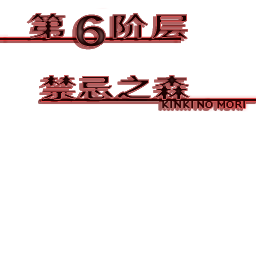
<style>
.page{position:relative;width:256px;height:256px;background:#ffffff}
.page>*{position:absolute;margin:0}
.t1{font:28.3px "HYWenHei-HEW";letter-spacing:0.052em;scale:1.36 1}
.t2{font:43.3px "HYWenHei-HEW";letter-spacing:0.052em;scale:1.36 1}
.t3{font:27.1px "HYWenHei-HEW";letter-spacing:0.044em;scale:1.33 1}
</style>
<div class="page">
<p class="t1" style="left:29px;top:13px;width:159px;height:27px">第   阶层</p>
<p class="t2" style="left:75px;top:14px;width:31px;height:34px">6</p>
<p class="t3" style="left:42px;top:75px;width:148px;height:25px">禁忌之森</p>
</div>
